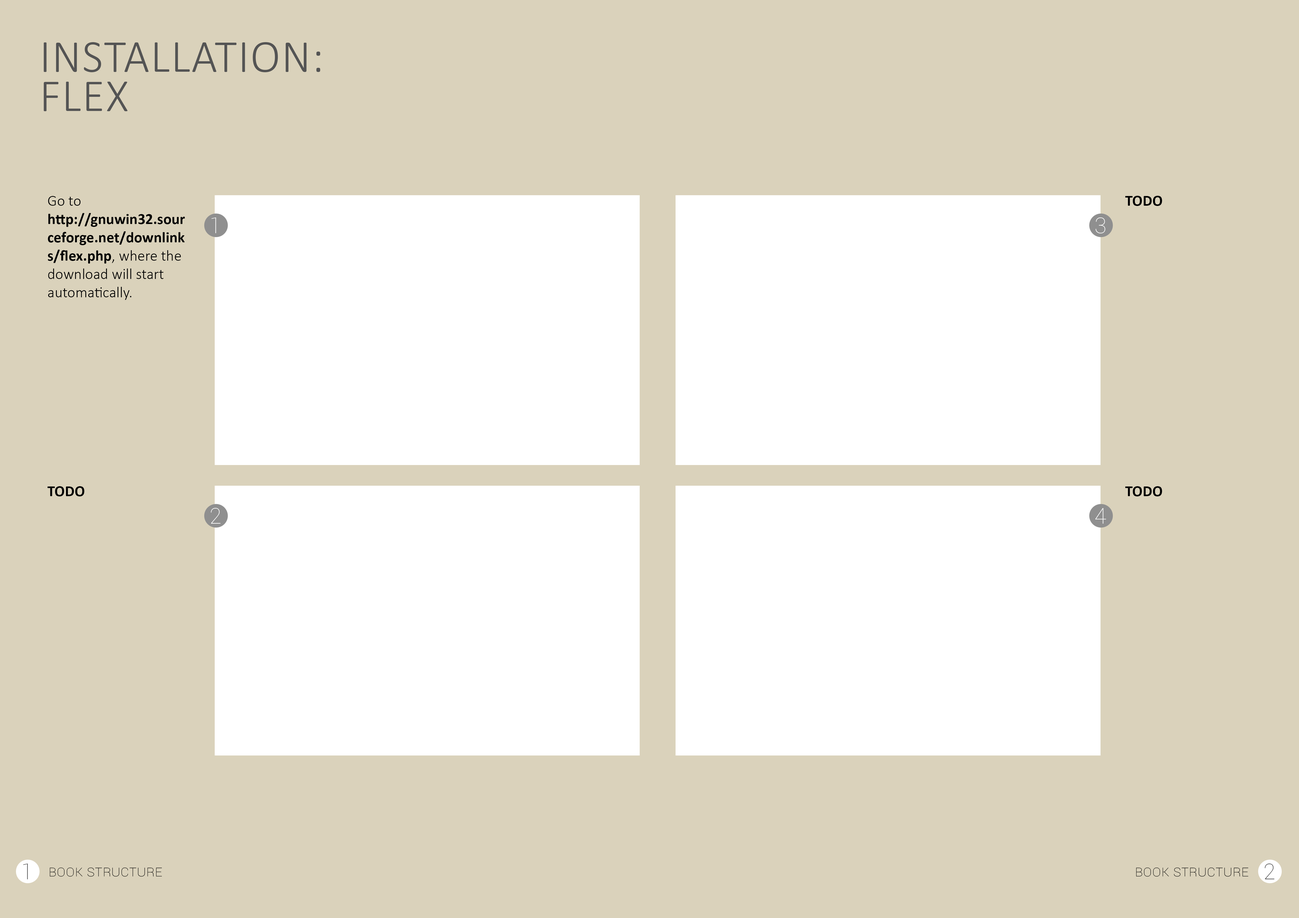
<style>
.page{position:relative;width:1299px;height:918px;background:#dad2bb}
.page>*{position:absolute;margin:0}
.t1{font:45.8px/39.3px "Calibri-Light";letter-spacing:0.025em;color:#545454;text-transform:uppercase}
.t2{font:15.3px "Calibri-Bold";color:#000000}
.t3{font:15.3px "Calibri-Light";color:#000000}
.t4{font:21.8px "Roboto-Thin";color:#ffffff}
.t5{font:21.8px "Roboto-Thin";color:#484848}
.t6{font:15.3px "Roboto-Thin";color:#000000;font-variant:small-caps}
</style>
<div class="page">
<p class="t1" style="left:44px;top:42px;width:276px;height:69px">installation:<br>flex</p>
<p class="t2" style="left:48px;top:196px;width:137px;height:104px"><span class="t3">Go to </span>http://gnuwin32.sourceforge.net/downlinks/flex.php<span class="t3">, where the download will start automatically.</span></p>
<p class="t2" style="left:1125px;top:196px;width:37px;height:10px">TODO</p>
<p class="t4" style="left:211px;top:218px;width:5px;height:15px">1</p>
<p class="t4" style="left:1095px;top:217px;width:10px;height:16px">3</p>
<p class="t2" style="left:47px;top:486px;width:37px;height:11px">TODO</p>
<p class="t2" style="left:1125px;top:486px;width:37px;height:11px">TODO</p>
<p class="t4" style="left:211px;top:508px;width:9px;height:16px">2</p>
<p class="t4" style="left:1095px;top:508px;width:11px;height:16px">4</p>
<p class="t5" style="left:23px;top:864px;width:5px;height:16px">1</p>
<p class="t6" style="left:50px;top:868px;width:112px;height:9px">Book structure</p>
<p class="t6" style="left:1136px;top:868px;width:112px;height:9px">Book structure</p>
<p class="t5" style="left:1264px;top:864px;width:10px;height:16px">2</p>
</div>
